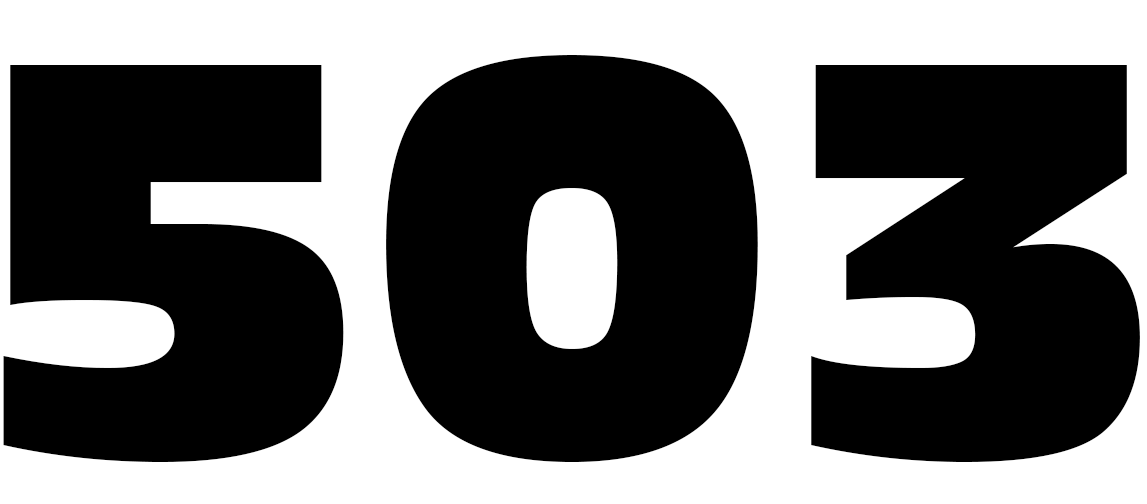
<style>
.page{position:relative;width:1147px;height:504px;background:#000000}
.page>*{position:absolute;margin:0}
.t1{font:543.9px "AntiqueOlive-Compact";color:#000000;scale:1.05 1}
</style>
<div class="page">
<p class="t1" style="left:3px;top:55px;width:1137px;height:407px">503</p>
</div>
